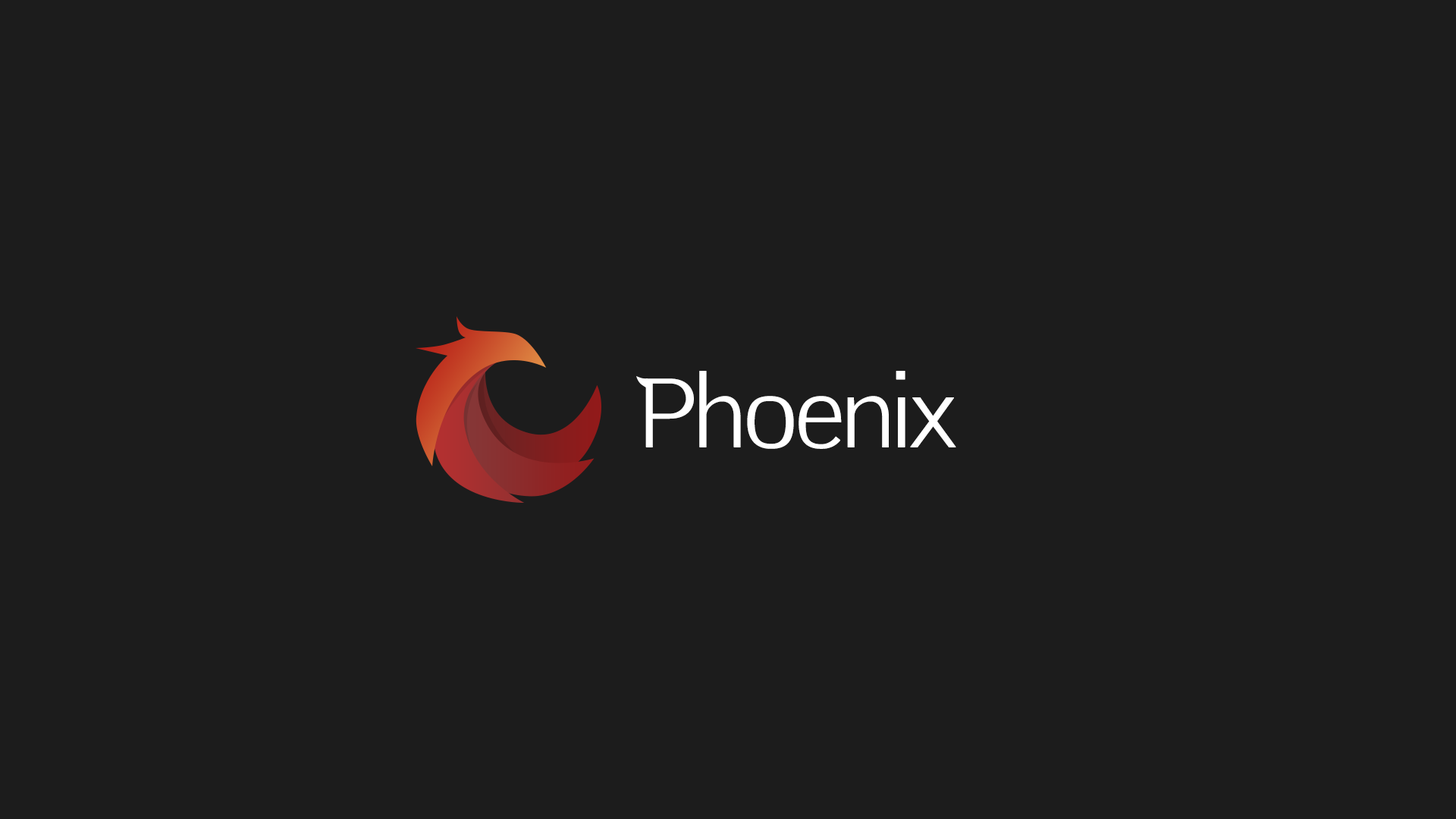
<style>
.page{position:relative;width:1456px;height:819px;background:#1c1c1c}
.page>*{position:absolute;margin:0}
.t1{font:95.3px "Aftasans";letter-spacing:-0.03em;color:#ffffff;font-weight:bold}
</style>
<div class="page">
<p class="t1" style="left:645px;top:371px;width:311px;height:78px">Phoenix</p>
</div>
